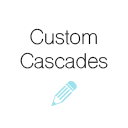
<style>
.page{position:relative;width:128px;height:128px;background:#ffffff}
.page>*{position:absolute;margin:0}
.t1{font:20px "ShreeDev0714";color:#000000}
.t2{font:30px "Sosa-Regular";color:#9ce1eb}
</style>
<div class="page">
<p class="t1" style="left:20px;top:28px;width:88px;height:41px;text-align:center">Custom Cascades</p>
<p class="t2" style="left:51px;top:81px;width:26px;height:25px">a</p>
</div>
